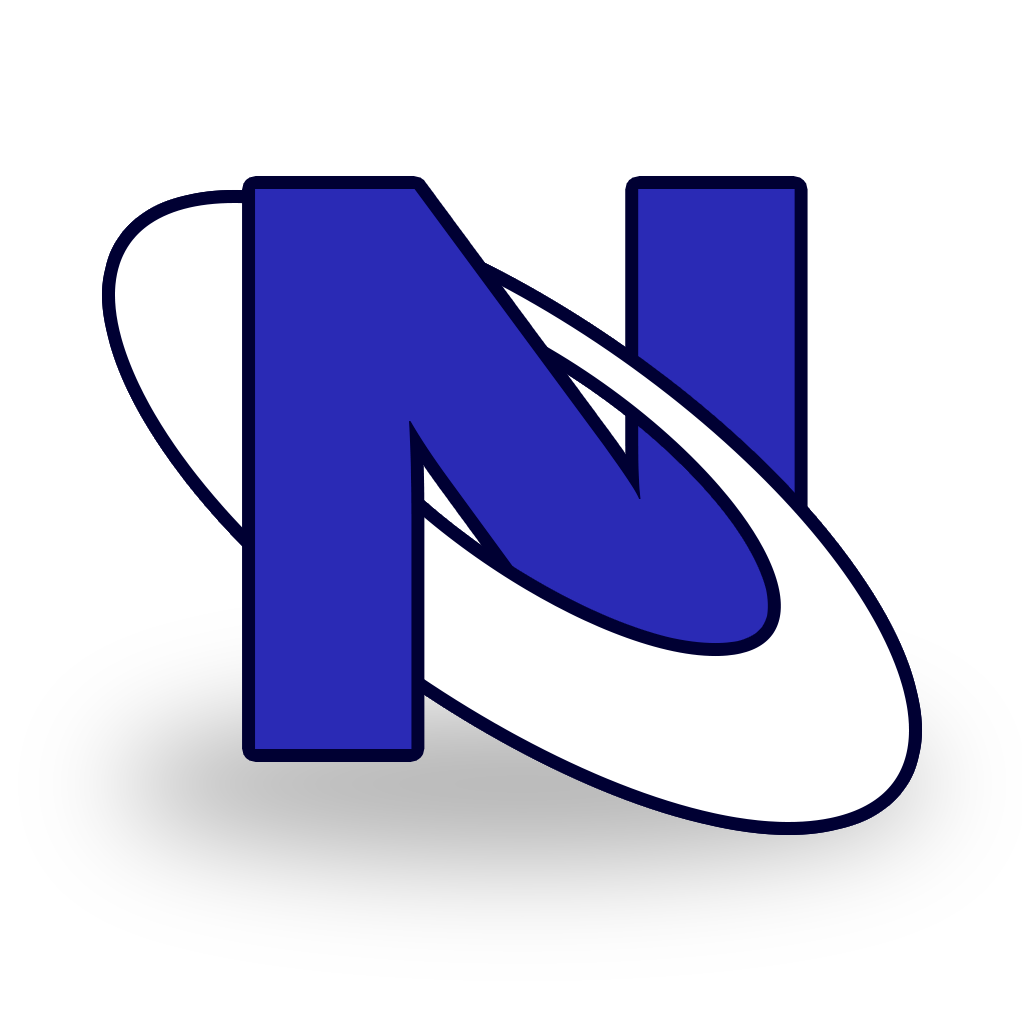
<style>
.page{position:relative;width:1024px;height:1024px;background:#ffffff}
.page>*{position:absolute;margin:0}
.t1{font:800px "SegoeUIBlack";color:#2a2ab5}
</style>
<div class="page">
<p class="t1" style="left:255px;top:189px;width:540px;height:560px">N</p>
</div>
